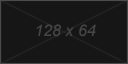
<style>
.page{position:relative;width:128px;height:64px;background:#161616}
.page>*{position:absolute;margin:0}
.t1{font:16px "Arial-ItalicMT";color:#464646}
</style>
<div class="page">
<p class="t1" style="left:36px;top:24px;width:60px;height:13px">128 x 64</p>
</div>
